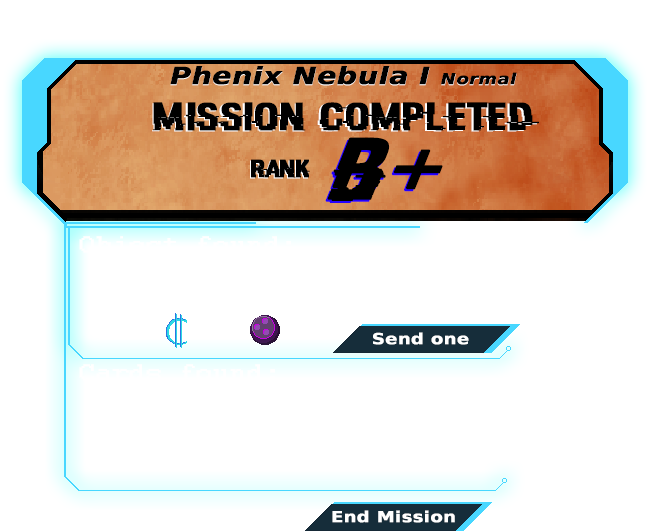
<style>
.page{position:relative;width:665px;height:531px;background:#ffffff}
.page>*{position:absolute;margin:0}
.t1{font:23.6px "DejaVuSans-BoldOblique";color:#000000;font-weight:bold;scale:1.19 1}
.t2{font:15px "DejaVuSans-BoldOblique";color:#000000;font-weight:bold;scale:1.19 1}
.t3{font:39.4px "HACKED";color:#000000;font-weight:bold;scale:1.19 1}
.t4{font:94.4px "HACKED";color:#000000;font-weight:bold;scale:1.15 1}
.t5{font:25px "HACKED";color:#000000;font-weight:bold;scale:1.19 1}
.t6{font:15px/17.9px "DejaVuSans-Bold";color:#ffffff;font-weight:bold;scale:1.19 1}
.t7{font:25px "Courier";color:#ffffff;font-weight:bold;scale:1.19 1}
.t8{font:15px "DejaVuSans-Bold";color:#ffffff;font-weight:bold;scale:1.19 1}
</style>
<div class="page">
<p class="t1" style="left:170px;top:67px;width:347px;height:19px">Phenix Nebula I <span class="t2">Normal</span></p>
<p class="t1" style="left:170px;top:66px;width:347px;height:19px">Phenix Nebula I <span class="t2">Normal</span></p>
<p class="t3" style="left:153px;top:102px;width:386px;height:29px">Mission completed</p>
<p class="t3" style="left:152px;top:103px;width:385px;height:29px">Mission completed</p>
<p class="t4" style="left:327px;top:137px;width:116px;height:64px">B+</p>
<p class="t4" style="left:325px;top:139px;width:116px;height:64px">B+</p>
<p class="t5" style="left:250px;top:160px;width:59px;height:19px">Rank</p>
<p class="t5" style="left:251px;top:159px;width:59px;height:19px">Rank</p>
<p class="t6" style="left:373px;top:332px;width:96px;height:13px;text-align:center">Send one<br>d</p>
<p class="t7" style="left:79px;top:364px;width:196px;height:17px">Cards found:</p>
<p class="t8" style="left:332px;top:510px;width:123px;height:13px">End Mission</p>
</div>
